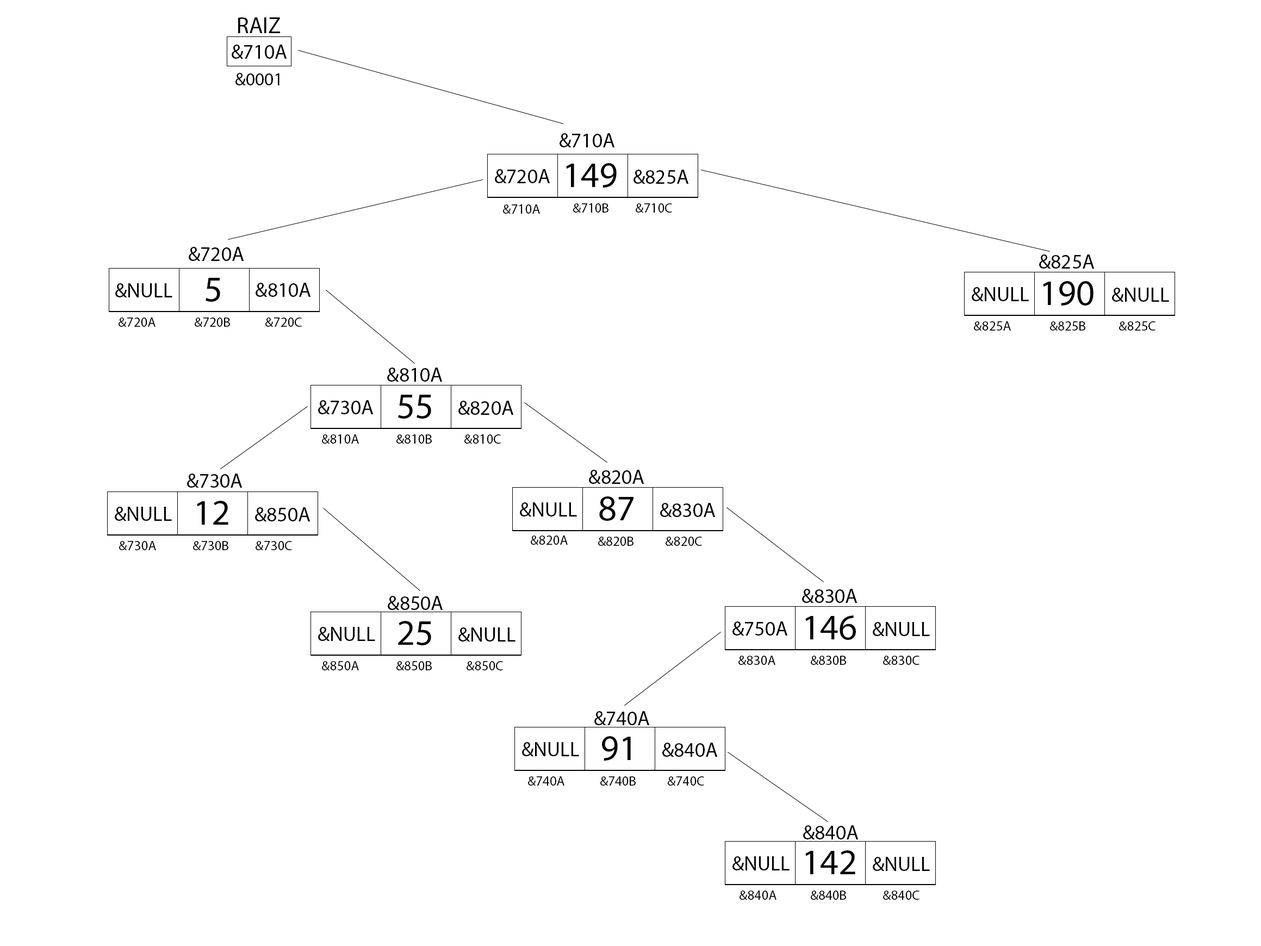
<style>
.page{position:relative;width:1261px;height:946px;background:#ffffff}
.page>*{position:absolute;margin:0}
.t1{font:22.7px "MyriadPro-Regular";color:#000000}
.t2{font:20.4px "MyriadPro-Regular";color:#000000}
.t3{font:18.1px "MyriadPro-Regular";color:#000000}
.t4{font:36.2px "MyriadPro-Regular";color:#000000}
.t5{font:13.6px "MyriadPro-Regular";color:#000000}
</style>
<div class="page">
<p class="t1" style="left:238px;top:17px;width:42px;height:16px">RAIZ</p>
<p class="t2" style="left:232px;top:45px;width:55px;height:14px">&amp;710A</p>
<p class="t3" style="left:235px;top:73px;width:44px;height:12px">&amp;0001</p>
<p class="t2" style="left:559px;top:133px;width:56px;height:14px">&amp;710A</p>
<p class="t2" style="left:495px;top:169px;width:55px;height:14px">&amp;720A</p>
<p class="t4" style="left:566px;top:163px;width:50px;height:25px">149</p>
<p class="t2" style="left:633px;top:170px;width:56px;height:14px">&amp;825A</p>
<p class="t5" style="left:503px;top:204px;width:37px;height:10px">&amp;710A</p>
<p class="t5" style="left:573px;top:203px;width:35px;height:10px">&amp;710B</p>
<p class="t5" style="left:635px;top:203px;width:37px;height:10px">&amp;710C</p>
<p class="t2" style="left:189px;top:247px;width:55px;height:14px">&amp;720A</p>
<p class="t2" style="left:1039px;top:254px;width:55px;height:15px">&amp;825A</p>
<p class="t4" style="left:205px;top:278px;width:15px;height:24px">5</p>
<p class="t4" style="left:1043px;top:281px;width:50px;height:25px">190</p>
<p class="t2" style="left:115px;top:283px;width:57px;height:14px">&amp;NULL</p>
<p class="t2" style="left:255px;top:283px;width:56px;height:14px">&amp;810A</p>
<p class="t2" style="left:971px;top:287px;width:58px;height:14px">&amp;NULL</p>
<p class="t2" style="left:1112px;top:288px;width:57px;height:14px">&amp;NULL</p>
<p class="t5" style="left:119px;top:317px;width:36px;height:10px">&amp;720A</p>
<p class="t5" style="left:195px;top:317px;width:35px;height:10px">&amp;720B</p>
<p class="t5" style="left:265px;top:317px;width:37px;height:10px">&amp;720C</p>
<p class="t5" style="left:974px;top:321px;width:37px;height:10px">&amp;825A</p>
<p class="t5" style="left:1050px;top:321px;width:35px;height:10px">&amp;825B</p>
<p class="t5" style="left:1119px;top:321px;width:36px;height:10px">&amp;825C</p>
<p class="t2" style="left:387px;top:367px;width:56px;height:15px">&amp;810A</p>
<p class="t2" style="left:318px;top:400px;width:55px;height:14px">&amp;730A</p>
<p class="t4" style="left:398px;top:395px;width:33px;height:24px">55</p>
<p class="t2" style="left:458px;top:401px;width:56px;height:14px">&amp;820A</p>
<p class="t5" style="left:322px;top:434px;width:37px;height:10px">&amp;810A</p>
<p class="t5" style="left:396px;top:434px;width:36px;height:10px">&amp;810B</p>
<p class="t5" style="left:464px;top:434px;width:37px;height:10px">&amp;810C</p>
<p class="t2" style="left:187px;top:473px;width:55px;height:15px">&amp;730A</p>
<p class="t2" style="left:589px;top:470px;width:55px;height:14px">&amp;820A</p>
<p class="t4" style="left:599px;top:496px;width:34px;height:25px">87</p>
<p class="t2" style="left:115px;top:507px;width:57px;height:14px">&amp;NULL</p>
<p class="t4" style="left:197px;top:501px;width:31px;height:24px">12</p>
<p class="t2" style="left:255px;top:507px;width:55px;height:14px">&amp;850A</p>
<p class="t2" style="left:520px;top:502px;width:57px;height:14px">&amp;NULL</p>
<p class="t2" style="left:660px;top:503px;width:55px;height:14px">&amp;830A</p>
<p class="t5" style="left:119px;top:541px;width:37px;height:9px">&amp;730A</p>
<p class="t5" style="left:193px;top:541px;width:35px;height:9px">&amp;730B</p>
<p class="t5" style="left:255px;top:541px;width:37px;height:9px">&amp;730C</p>
<p class="t5" style="left:531px;top:535px;width:37px;height:10px">&amp;820A</p>
<p class="t5" style="left:598px;top:537px;width:35px;height:9px">&amp;820B</p>
<p class="t5" style="left:665px;top:537px;width:37px;height:9px">&amp;820C</p>
<p class="t2" style="left:802px;top:589px;width:55px;height:14px">&amp;830A</p>
<p class="t2" style="left:388px;top:596px;width:55px;height:14px">&amp;850A</p>
<p class="t4" style="left:805px;top:615px;width:51px;height:25px">146</p>
<p class="t2" style="left:318px;top:627px;width:57px;height:14px">&amp;NULL</p>
<p class="t4" style="left:398px;top:621px;width:33px;height:24px">25</p>
<p class="t2" style="left:458px;top:627px;width:57px;height:14px">&amp;NULL</p>
<p class="t2" style="left:732px;top:621px;width:56px;height:14px">&amp;750A</p>
<p class="t2" style="left:873px;top:622px;width:57px;height:14px">&amp;NULL</p>
<p class="t5" style="left:322px;top:661px;width:37px;height:9px">&amp;850A</p>
<p class="t5" style="left:396px;top:661px;width:36px;height:9px">&amp;850B</p>
<p class="t5" style="left:466px;top:661px;width:37px;height:9px">&amp;850C</p>
<p class="t5" style="left:738px;top:656px;width:37px;height:9px">&amp;830A</p>
<p class="t5" style="left:811px;top:656px;width:35px;height:9px">&amp;830B</p>
<p class="t5" style="left:883px;top:656px;width:36px;height:9px">&amp;830C</p>
<p class="t2" style="left:594px;top:711px;width:56px;height:14px">&amp;740A</p>
<p class="t4" style="left:602px;top:736px;width:29px;height:25px">91</p>
<p class="t2" style="left:522px;top:742px;width:57px;height:14px">&amp;NULL</p>
<p class="t2" style="left:662px;top:743px;width:56px;height:14px">&amp;840A</p>
<p class="t5" style="left:528px;top:776px;width:36px;height:10px">&amp;740A</p>
<p class="t5" style="left:600px;top:776px;width:35px;height:10px">&amp;740B</p>
<p class="t5" style="left:668px;top:776px;width:36px;height:10px">&amp;740C</p>
<p class="t2" style="left:803px;top:825px;width:55px;height:14px">&amp;840A</p>
<p class="t2" style="left:732px;top:856px;width:57px;height:14px">&amp;NULL</p>
<p class="t4" style="left:805px;top:850px;width:50px;height:24px">142</p>
<p class="t2" style="left:873px;top:857px;width:57px;height:14px">&amp;NULL</p>
<p class="t5" style="left:739px;top:890px;width:37px;height:10px">&amp;840A</p>
<p class="t5" style="left:811px;top:890px;width:35px;height:10px">&amp;840B</p>
<p class="t5" style="left:883px;top:890px;width:36px;height:10px">&amp;840C</p>
</div>
